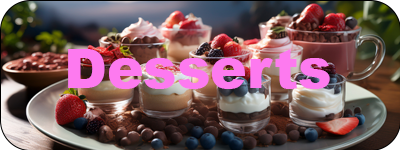
<style>
.page{position:relative;width:400px;height:150px}
.page>*{position:absolute;margin:0}
.t1{font:54.7px "Arial-Black";color:#fd7aef}
</style>
<div class="page">
<p class="t1" style="left:68px;top:49px;width:262px;height:40px">Desserts</p>
</div>
